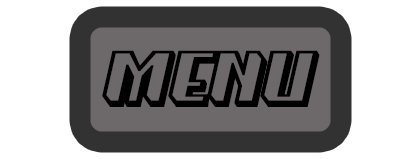
<style>
.page{position:relative;width:415px;height:159px;background:#ffffff}
.page>*{position:absolute;margin:0}
.t1{font:70.9px "SuperDrift3D";letter-spacing:-0.04em;color:#000000;font-weight:bold}
</style>
<div class="page">
<p class="t1" style="left:102px;top:50px;width:218px;height:57px">Menu</p>
</div>
